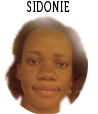
<style>
.page{position:relative;width:98px;height:114px;background:#ffffff}
.page>*{position:absolute;margin:0}
.t1{font:14.4px "Museo-300";letter-spacing:0.12em;color:#000000;scale:0.63 1}
</style>
<div class="page">
<p class="t1" style="left:27px;top:1px;width:43px;height:11px">SIDONIE</p>
</div>
